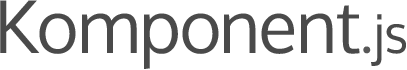
<style>
.page{position:relative;width:407px;height:70px;background:#ffffff}
.page>*{position:absolute;margin:0}
.t1{font:72px "Oxygen";color:#4a4a4a}
.t2{font:53px "Oxygen";color:#585858}
.t3{font:53px "Oxygen";color:#4a4a4a}
</style>
<div class="page">
<p class="t1" style="left:0px;top:0px;width:406px;height:69px">Komponent<span class="t2">.</span><span class="t3">js</span></p>
</div>
